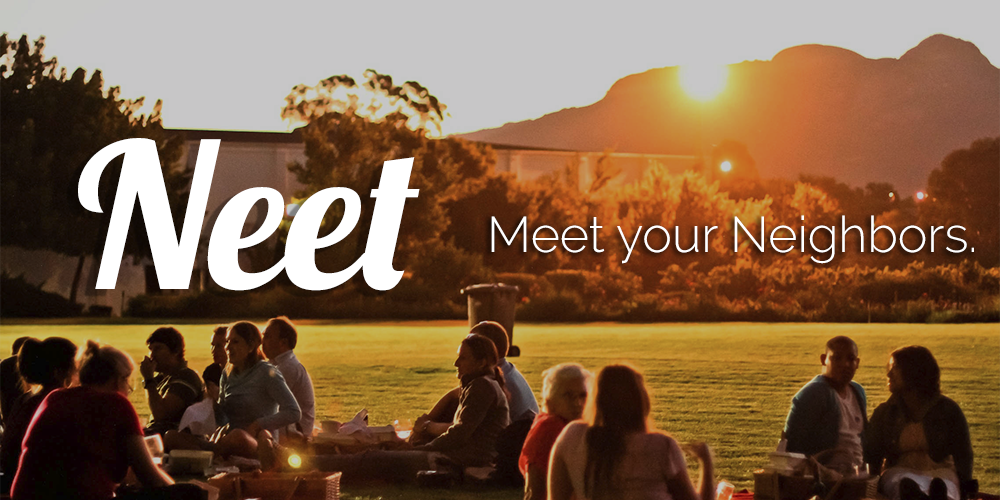
<style>
.page{position:relative;width:1000px;height:500px}
.page>*{position:absolute;margin:0}
.t1{font:200px "Lobster-Regular";color:#ffffff}
.t2{font:50px "Raleway-Light";color:#ffffff}
</style>
<div class="page">
<p class="t1" style="left:78px;top:138px;width:342px;height:153px">Neet</p>
<p class="t2" style="left:491px;top:215px;width:483px;height:49px">Meet your Neighbors.</p>
</div>
